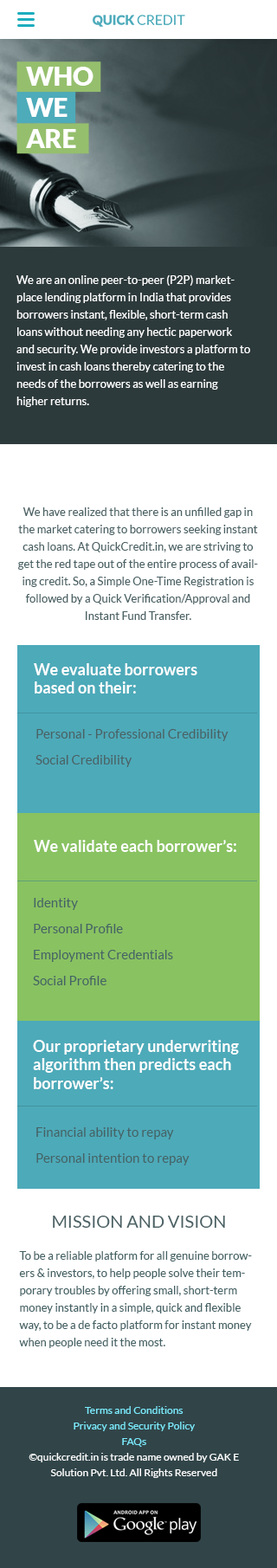
<style>
.page{position:relative;width:277px;height:1568px;background:#ffffff}
.page>*{position:absolute;margin:0}
.t1{font:25.7px "Lato-Black";color:#ffffff;text-transform:uppercase}
.t2{font:11.3px/17.3px "Lato-Regular";color:#ffffff}
.t3{font:11.3px/17.3px "Lato-Regular";color:#4a6164}
.t4{font:15.6px "Lato-Bold";color:#ffffff}
.t5{font:13px/26px "Lato-Regular";color:#4a6164}
.t6{font:13px/26px "Lato-Regular";color:#456265}
.t7{font:17.3px "Lato-Regular";color:#4a6164;text-transform:uppercase}
.t8{font:11.3px/17.3px "Lato-Regular";color:#456265}
.t9{font:10.4px/15.6px "Lato-Regular";color:#ffffff}
.t10{font:10.4px/15.6px "Lato-Regular";color:#7cebfc}
</style>
<div class="page">
<p class="t1" style="left:26px;top:67px;width:68px;height:81px">Who<br>We<br>Are</p>
<p class="t2" style="left:16px;top:274px;width:234px;height:133px">We are an online peer-to-peer (P2P) marketplace lending platform in India that provides borrowers instant, flexible, short-term cash loans without needing any hectic paperwork and security. We provide investors a platform to invest in cash loans thereby catering to the needs of the borrowers as well as earning higher returns.</p>
<p class="t3" style="left:18px;top:507px;width:240px;height:113px;text-align:center">We have realized that there is an unfilled gap in the market catering to borrowers seeking instant cash loans. At QuickCredit.in, we are striving to get the red tape out of the entire process of availing credit. So, a Simple One-Time Registration is followed by a Quick Verification/Approval and Instant Fund Transfer.</p>
<p class="t4" style="left:34px;top:663px;width:163px;height:31px">We evaluate borrowers<br>based on their:</p>
<p class="t5" style="left:35px;top:729px;width:194px;height:38px">Personal - Professional Credibility<br>Social Credibility</p>
<p class="t4" style="left:34px;top:840px;width:202px;height:12px">We validate each borrower’s:</p>
<p class="t6" style="left:33px;top:898px;width:140px;height:87px">Identity<br>Personal Profile<br>Employment Credentials<br>Social Profile</p>
<p class="t4" style="left:33px;top:1040px;width:206px;height:49px">Our proprietary underwriting <br>algorithm then predicts each <br>borrower’s:</p>
<p class="t6" style="left:36px;top:1127px;width:154px;height:38px">Financial ability to repay<br>Personal intention to repay</p>
<p class="t7" style="left:53px;top:1216px;width:172px;height:12px">Mission and vision</p>
<p class="t8" style="left:19px;top:1251px;width:233px;height:97px">To be a reliable platform for all genuine borrowers &amp; investors, to help people solve their temporary troubles by offering small, short-term money instantly in a simple, quick and flexible way, to be a de facto platform for instant money when people need it the most.</p>
<p class="t9" style="left:29px;top:1406px;width:210px;height:72px;text-align:center"><span class="t10">Terms and Conditions        <br>Privacy and Security Policy         <br>FAQs<br></span>©quickcredit.in is trade name owned by GAK E Solution Pvt. Ltd. All Rights Reserved</p>
</div>
